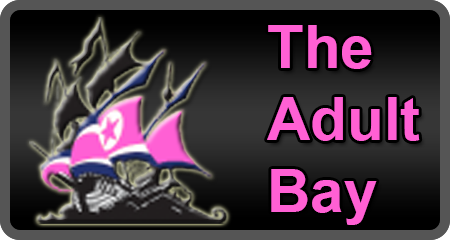
<style>
.page{position:relative;width:450px;height:240px}
.page>*{position:absolute;margin:0}
.t1{font:60px "Arial-BoldMT";color:#ff60d4}
</style>
<div class="page">
<p class="t1" style="left:267px;top:25px;width:153px;height:200px">The<br>Adult<br>Bay</p>
</div>
